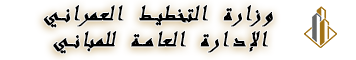
<style>
.page{position:relative;width:356px;height:60px;background:#ffffff}
.page>*{position:absolute;margin:0}
.t1{font:24px "Andalus";letter-spacing:0.1em;color:#000000;font-weight:bold;font-style:italic}
</style>
<div class="page">
<p class="t1" style="left:43px;top:5px;width:230px;height:23px">وزارة التخطيط العمراني</p>
<p class="t1" style="left:53px;top:31px;width:215px;height:23px">الإدارة العامة للمباني</p>
</div>
